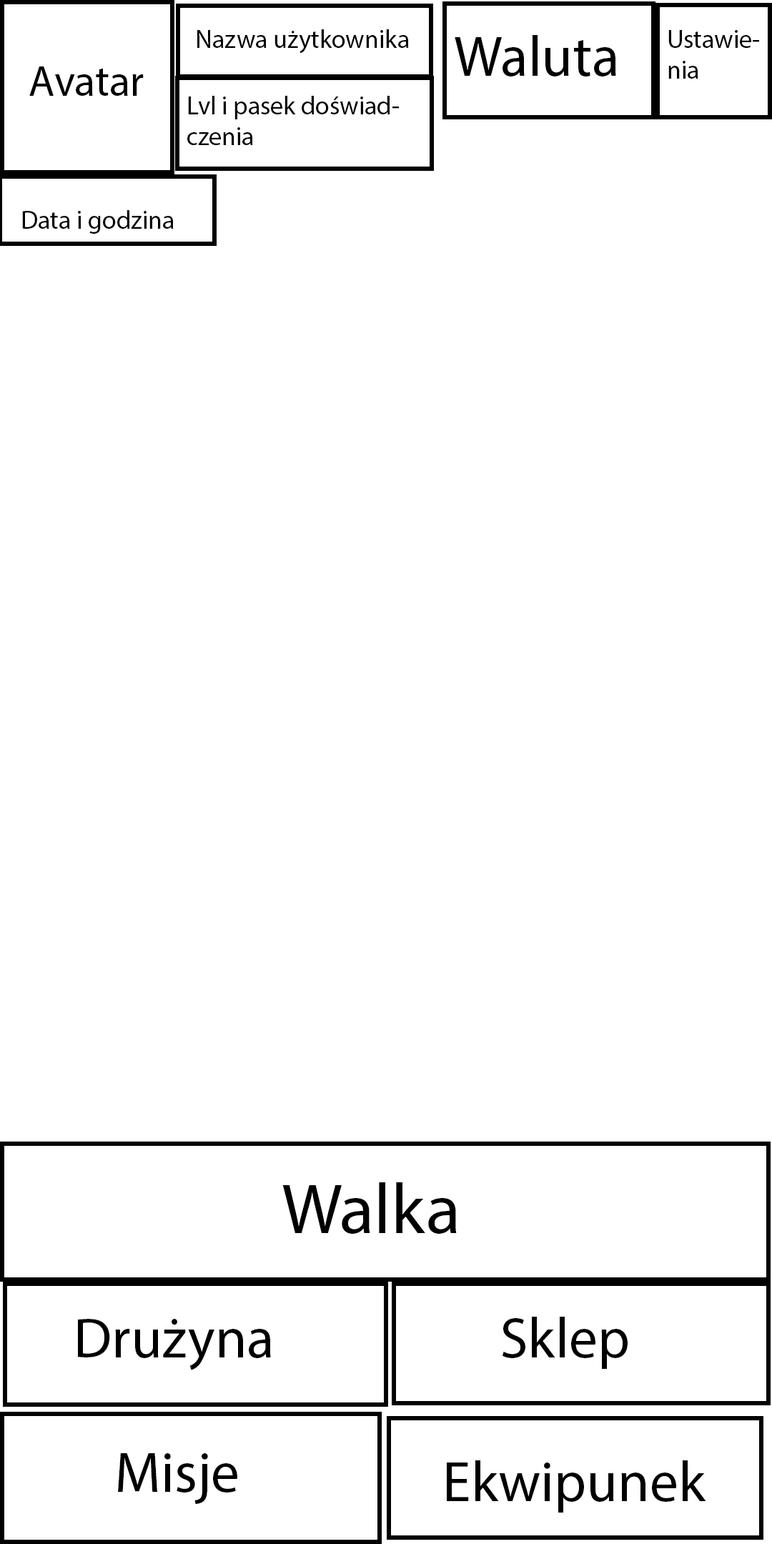
<style>
.page{position:relative;width:772px;height:1544px;background:#ffffff}
.page>*{position:absolute;margin:0}
.t1{font:25.7px "MyriadPro-Regular";color:#000000}
.t2{font:57.2px "MyriadPro-Regular";color:#000000}
.t3{font:42.9px "MyriadPro-Regular";color:#000000}
.t4{font:71.5px "MyriadPro-Regular";color:#000000}
</style>
<div class="page">
<p class="t1" style="left:197px;top:29px;width:212px;height:25px">Nazwa użytkownika</p>
<p class="t2" style="left:455px;top:35px;width:161px;height:42px">Waluta</p>
<p class="t1" style="left:668px;top:30px;width:91px;height:49px">Ustawienia</p>
<p class="t3" style="left:29px;top:66px;width:115px;height:30px">Avatar</p>
<p class="t1" style="left:187px;top:96px;width:212px;height:49px">Lvl i pasek doświadczenia</p>
<p class="t1" style="left:22px;top:210px;width:152px;height:24px">Data i godzina</p>
<p class="t4" style="left:282px;top:1183px;width:175px;height:51px">Walka</p>
<p class="t2" style="left:78px;top:1319px;width:193px;height:52px">Drużyna</p>
<p class="t2" style="left:503px;top:1317px;width:125px;height:52px">Sklep</p>
<p class="t2" style="left:118px;top:1454px;width:119px;height:50px">Misje</p>
<p class="t2" style="left:447px;top:1461px;width:259px;height:52px">Ekwipunek</p>
</div>
